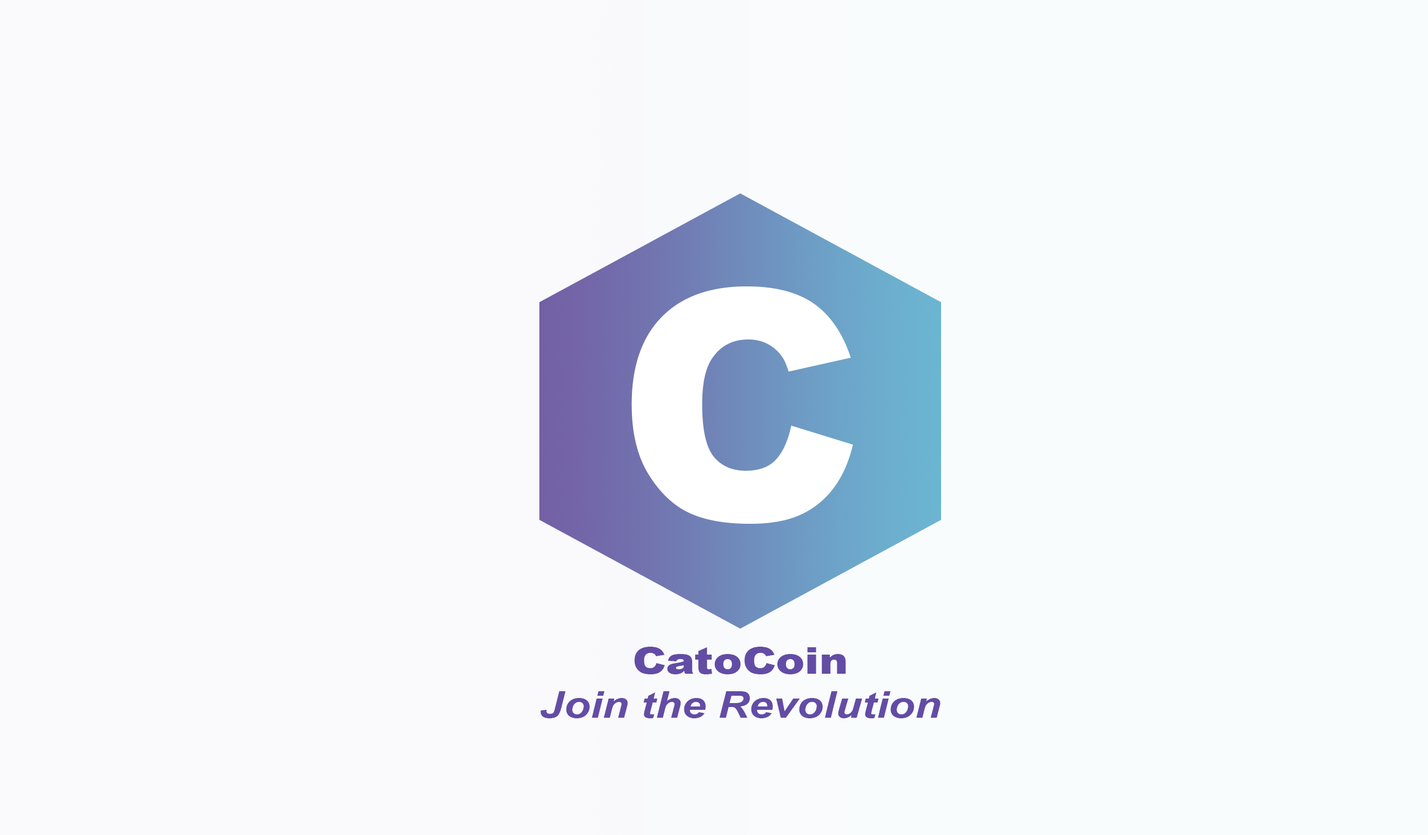
<style>
.page{position:relative;width:1428px;height:835px;background:#f9fcfd}
.page>*{position:absolute;margin:0}
.t1{font:320.8px "Arial-Black";color:#ffffff}
.t2{font:36.9px "Arial-BoldItalicMT";color:#634ca5;scale:1.17 1}
.t3{font:36.9px "Arial-Black";color:#634ca5;scale:1.17 1}
</style>
<div class="page">
<p class="t1" style="left:631px;top:287px;width:222px;height:237px">C</p>
<p class="t2" style="left:540px;top:647px;width:400px;height:72px;text-align:center"><span class="t3">CatoCoin<br></span>Join the Revolution</p>
</div>
